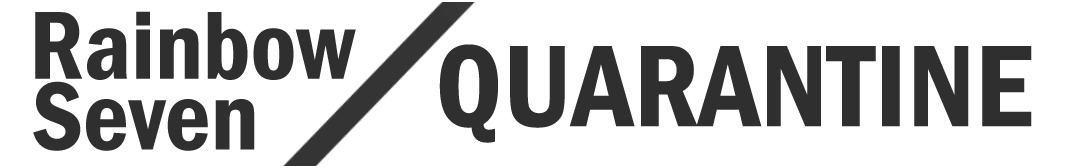
<style>
.page{position:relative;width:1065px;height:168px;background:#ffffff}
.page>*{position:absolute;margin:0}
.t1{font:100px "FranklinGothic-DemiCond";color:#2f2f2f}
.t2{font:120px "FranklinGothic-DemiCond";color:#2f2f2f}
</style>
<div class="page">
<p class="t1" style="left:35px;top:11px;width:321px;height:69px">Rainbow</p>
<p class="t2" style="left:439px;top:44px;width:593px;height:99px">QUARANTINE</p>
<p class="t1" style="left:33px;top:81px;width:222px;height:70px">Seven</p>
</div>
